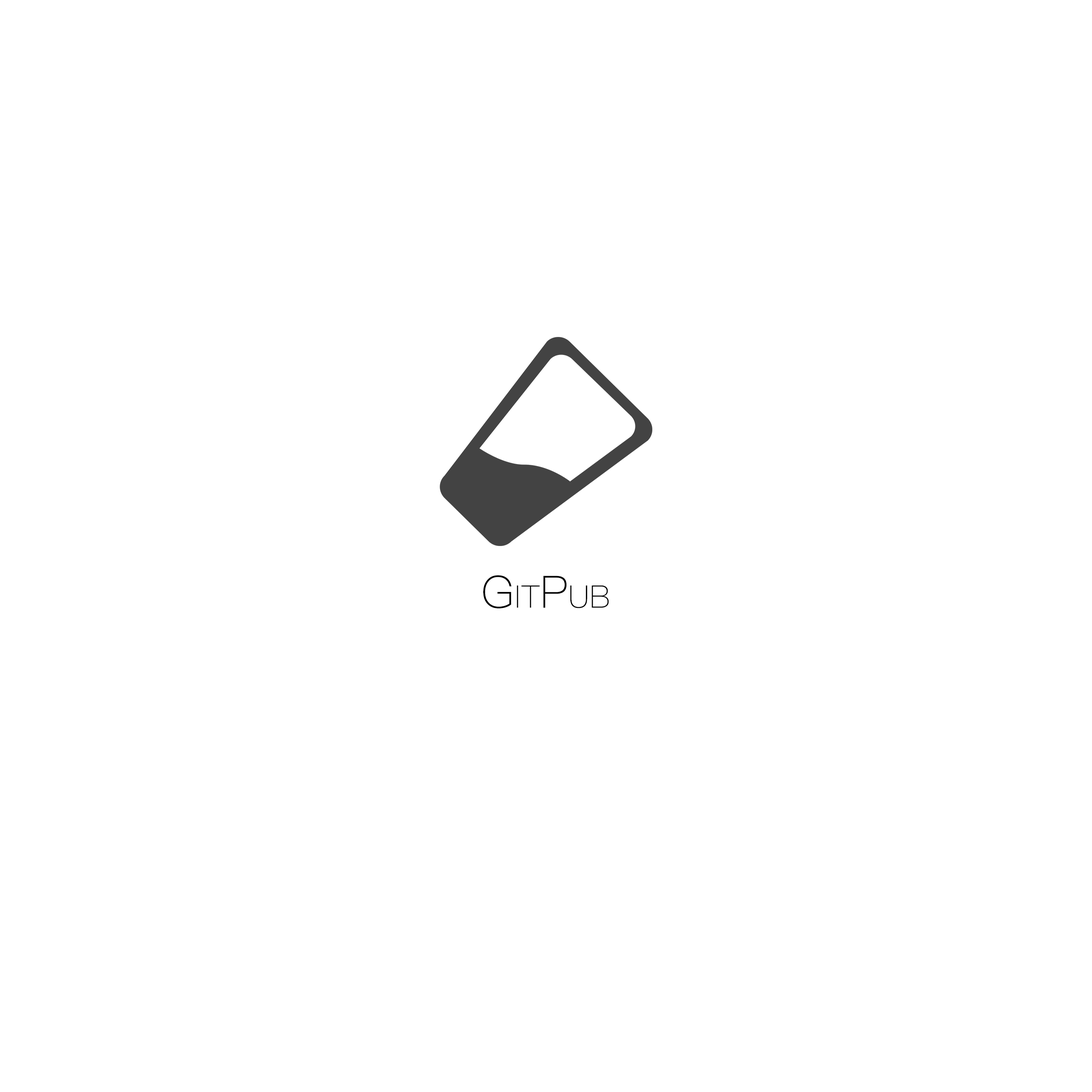
<style>
.page{position:relative;width:1092px;height:1092px;background:#ffffff}
.page>*{position:absolute;margin:0}
.t1{font:44.5px "PingFangSC-Thin";color:#000000;font-variant:small-caps}
</style>
<div class="page">
<p class="t1" style="left:483px;top:575px;width:126px;height:33px">GitPub</p>
</div>
